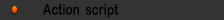
<style>
.page{position:relative;width:224px;height:20px;background:#333333}
.page>*{position:absolute;margin:0}
.t1{font:14.9px "ArialRoundedMTBold";color:#030303;scale:0.78 1}
</style>
<div class="page">
<p class="t1" style="left:43px;top:4px;width:76px;height:14px">Action  script</p>
</div>
